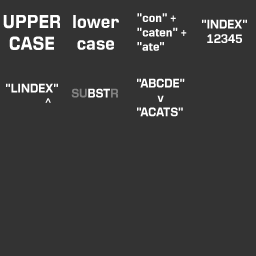
<style>
.page{position:relative;width:256px;height:256px;background:#333333}
.page>*{position:absolute;margin:0}
.t1{font:18px "Moire-Bold";color:#ffffff;scale:0.85 1}
.t2{font:12px "Moire-Bold";color:#ffffff;scale:0.85 1}
.t3{font:12px "Moire-Bold";color:#818181;scale:0.85 1}
</style>
<div class="page">
<p class="t1" style="left:3px;top:15px;width:57px;height:35px;text-align:center">UPPER<br>CASE</p>
<p class="t1" style="left:73px;top:15px;width:46px;height:35px;text-align:center">lower<br>case</p>
<p class="t2" style="left:137px;top:13px;width:50px;height:38px">"con" +<br>"caten" +<br>"ate"</p>
<p class="t2" style="left:202px;top:19px;width:45px;height:24px">"INDEX"<br>  12345</p>
<p class="t2" style="left:137px;top:78px;width:48px;height:39px">"ABCDE"<br>        v<br>"ACATS"</p>
<p class="t2" style="left:6px;top:83px;width:52px;height:20px">"LINDEX"<br>               ^</p>
<p class="t2" style="left:71px;top:88px;width:47px;height:10px"><span class="t3">SU</span>BST<span class="t3">R</span></p>
</div>
